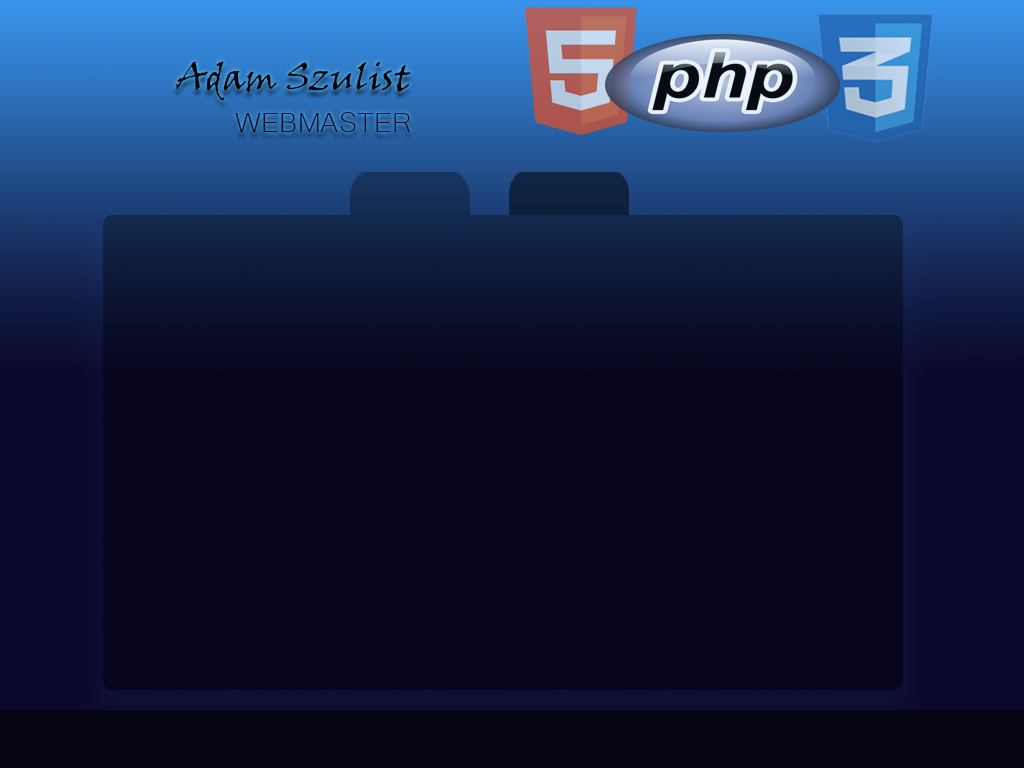
<style>
.page{position:relative;width:1024px;height:768px;background:#08061f}
.page>*{position:absolute;margin:0}
.t1{font:36px "VinerHandITC";color:#000000}
.t2{font:36px "Microsoft-Yi-Baiti";color:#0b092c}
</style>
<div class="page">
<p class="t1" style="left:176px;top:61px;width:235px;height:40px">Adam Szulist</p>
<p class="t2" style="left:235px;top:112px;width:175px;height:20px">WEBMASTER</p>
</div>
